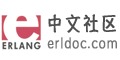
<style>
.page{position:relative;width:120px;height:60px;background:#ffffff}
.page>*{position:absolute;margin:0}
.t1{font:19.2px "HannotateSC-W7";letter-spacing:0.1em;color:#4e4e4e;font-weight:bold;scale:0.83 1}
.t2{font:14.4px "STYuanti-SC-Regular";letter-spacing:0.075em;color:#747474;font-weight:bold;scale:0.83 1}
</style>
<div class="page">
<p class="t1" style="left:48px;top:14px;width:68px;height:19px">中文社区</p>
<p class="t2" style="left:47px;top:37px;width:70px;height:12px">erldoc.com</p>
</div>
